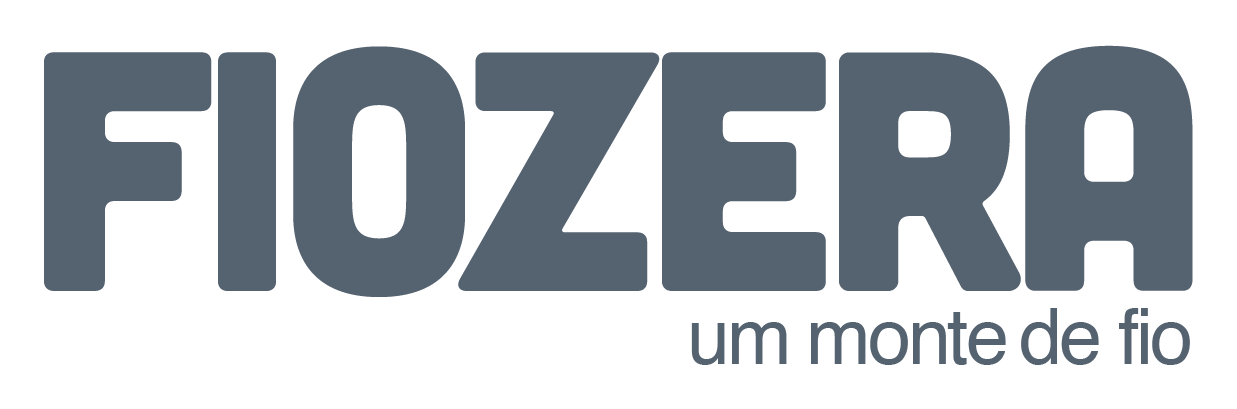
<style>
.page{position:relative;width:1237px;height:409px;background:#ffffff}
.page>*{position:absolute;margin:0}
.t1{font:340.8px "Cubano-Regular";letter-spacing:-0.04em;color:#556270}
.t2{font:77.3px "Helvetica";letter-spacing:-0.04em;color:#556270}
</style>
<div class="page">
<p class="t1" style="left:44px;top:45px;width:1149px;height:252px">Fiozera</p>
<p class="t2" style="left:691px;top:308px;width:499px;height:57px">um monte de fio</p>
</div>
